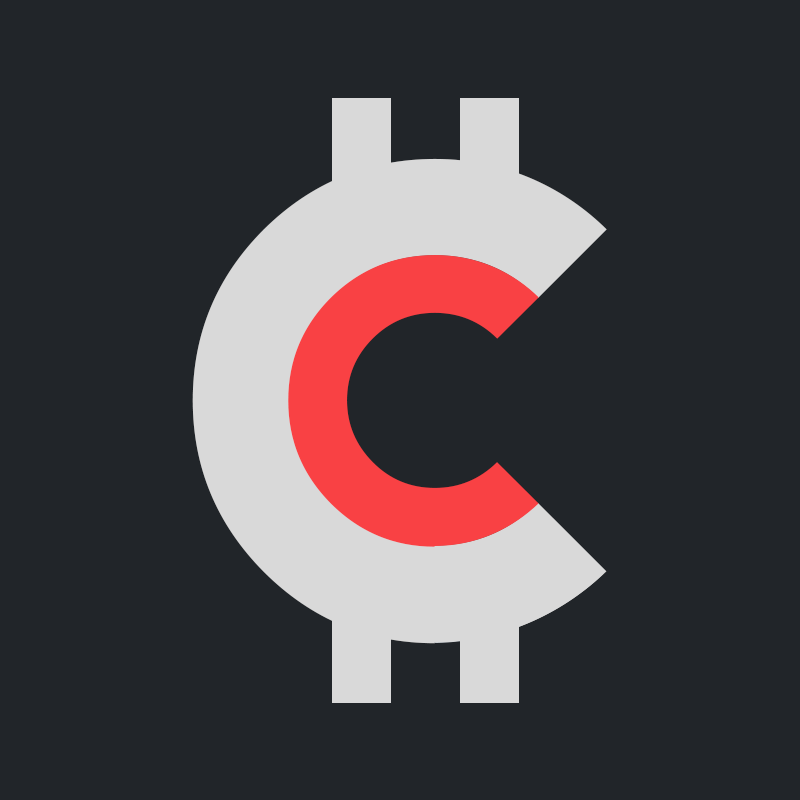
<style>
.page{position:relative;width:800px;height:800px;background:#212529}
.page>*{position:absolute;margin:0}
.t1{font:605.8px "LemonMilk";letter-spacing:0.01em;color:#d9d9d9}
.t2{font:364.6px "LemonMilk";letter-spacing:0.01em;color:#f94144}
</style>
<div class="page">
<p class="t1" style="left:192px;top:158px;width:415px;height:486px">c</p>
<p class="t2" style="left:288px;top:255px;width:251px;height:292px">c</p>
</div>
